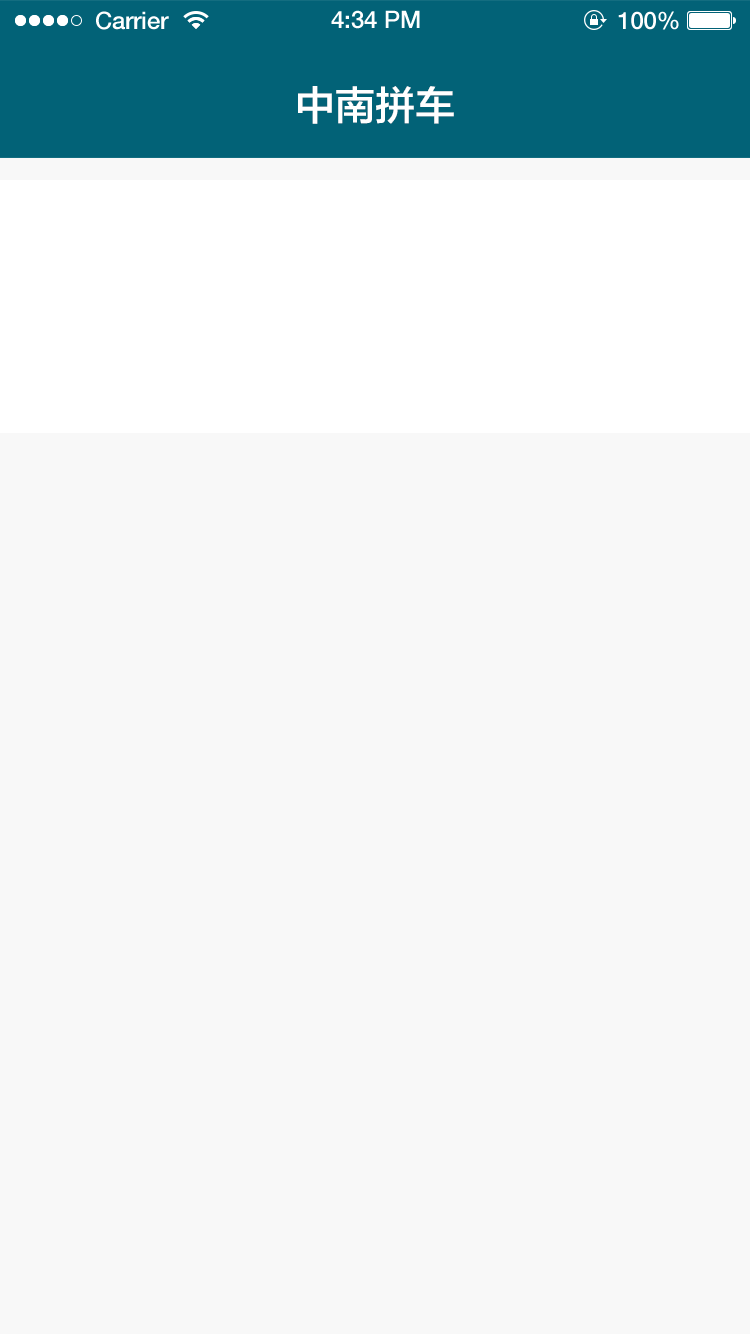
<style>
.page{position:relative;width:750px;height:1334px;background:#f8f8f8}
.page>*{position:absolute;margin:0}
.t1{font:24px "HelveticaNeue-Medium";color:#ffffff}
.t2{font:40px "FZLTZHK--GBK1-0";color:#ffffff}
</style>
<div class="page">
<p class="t1" style="left:96px;top:11px;width:73px;height:19px">Carrier</p>
<p class="t1" style="left:331px;top:10px;width:89px;height:19px">4:34 PM</p>
<p class="t1" style="left:618px;top:11px;width:61px;height:19px">100%</p>
<p class="t2" style="left:298px;top:86px;width:156px;height:38px">中南拼车</p>
</div>
